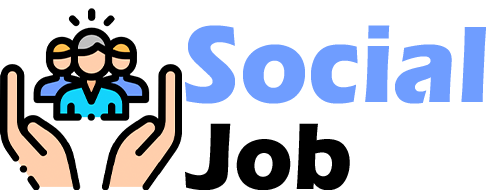
<style>
.page{position:relative;width:486px;height:190px;background:#ffffff}
.page>*{position:absolute;margin:0}
.t1{font:112.5px "ErasITC-Bold";color:#6f9dff;scale:0.93 1}
.t2{font:97.9px "ErasITC-Bold";color:#000000;scale:0.93 1}
</style>
<div class="page">
<p class="t1" style="left:185px;top:25px;width:301px;height:79px">Social</p>
<p class="t2" style="left:185px;top:123px;width:165px;height:68px">Job</p>
</div>
